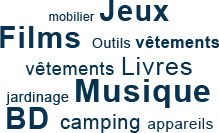
<style>
.page{position:relative;width:219px;height:133px;background:#ffffff}
.page>*{position:absolute;margin:0}
.t1{font:16px/27px "Arial-BoldMT";letter-spacing:0.04em;color:#073351}
.t2{font:12px/25px "ArialMT";letter-spacing:0.04em;color:#073351}
.t3{font:12px/27px "ArialMT";letter-spacing:0.04em;color:#073351}
.t4{font:29px/27px "Arial-BoldMT";letter-spacing:0.04em;color:#073351}
.t5{font:30px/27px "Arial-BoldMT";letter-spacing:0.04em;color:#073351}
.t6{font:14px/27px "ArialMT";letter-spacing:0.04em;color:#073351}
.t7{font:18px/27px "ArialMT";letter-spacing:0.04em;color:#073351}
.t8{font:25px/27px "ArialMT";letter-spacing:0.04em;color:#073351}
.t9{font:32px/27px "Arial-BoldMT";letter-spacing:0.04em;color:#073351}
.t10{font:20px/27px "ArialMT";letter-spacing:0.04em;color:#073351}
.t11{font:15px/27px "ArialMT";letter-spacing:0.04em;color:#073351}
</style>
<div class="page">
<p class="t1" style="left:0px;top:0px;width:219px;height:133px;text-align:center"><span class="t2">m</span><span class="t3">obilier </span><span class="t4">Jeux<br></span><span class="t5">Films </span><span class="t6">Outils </span>vêtements<br><span class="t7">vêtements </span><span class="t8">Livres<br></span><span class="t6">jardinage </span><span class="t9">Musique<br></span><span class="t5">BD </span><span class="t10">camping </span><span class="t11">appareils</span></p>
</div>
